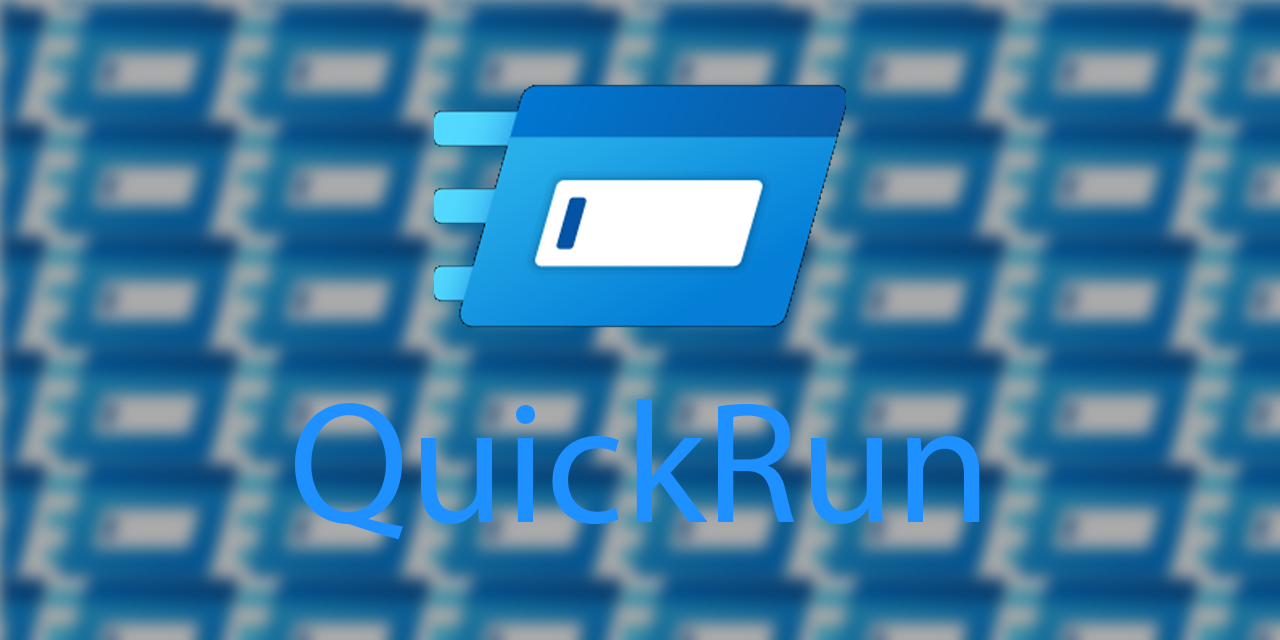
<style>
.page{position:relative;width:1280px;height:640px}
.page>*{position:absolute;margin:0}
.t1{font:173.9px "MyriadPro-Regular";color:#1e90ff}
</style>
<div class="page">
<p class="t1" style="left:295px;top:399px;width:685px;height:141px">QuickRun</p>
</div>
